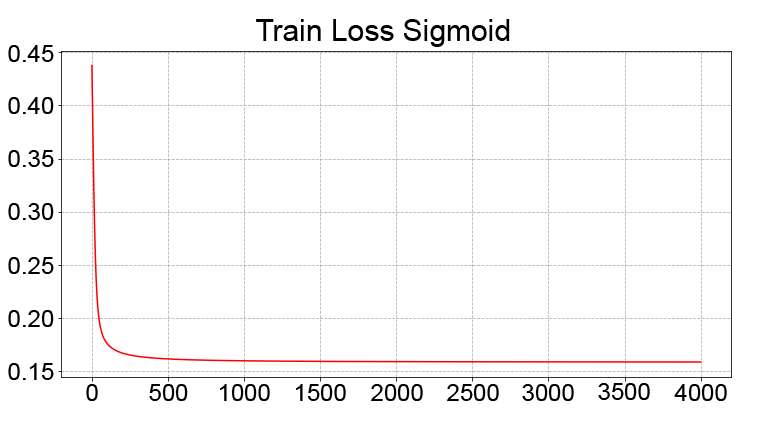
<style>
.page{position:relative;width:764px;height:430px;background:#ffffff}
.page>*{position:absolute;margin:0}
.t1{font:30px "ArialMT";color:#000000}
.t2{font:24px "ArialMT";color:#000000}
</style>
<div class="page">
<p class="t1" style="left:256px;top:19px;width:254px;height:28px">Train Loss Sigmoid</p>
<p class="t2" style="left:8px;top:45px;width:46px;height:17px">0.45</p>
<p class="t2" style="left:8px;top:97px;width:46px;height:17px">0.40</p>
<p class="t2" style="left:8px;top:150px;width:46px;height:17px">0.35</p>
<p class="t2" style="left:8px;top:203px;width:46px;height:17px">0.30</p>
<p class="t2" style="left:8px;top:257px;width:46px;height:17px">0.25</p>
<p class="t2" style="left:8px;top:310px;width:46px;height:17px">0.20</p>
<p class="t2" style="left:8px;top:363px;width:46px;height:17px">0.15</p>
<p class="t2" style="left:86px;top:384px;width:12px;height:17px">0</p>
<p class="t2" style="left:149px;top:384px;width:39px;height:17px">500</p>
<p class="t2" style="left:220px;top:384px;width:50px;height:17px">1000</p>
<p class="t2" style="left:296px;top:384px;width:50px;height:17px">1500</p>
<p class="t2" style="left:371px;top:384px;width:52px;height:17px">2000</p>
<p class="t2" style="left:447px;top:384px;width:52px;height:17px">2500</p>
<p class="t2" style="left:522px;top:384px;width:52px;height:17px">3000</p>
<p class="t2" style="left:598px;top:383px;width:52px;height:17px">3500</p>
<p class="t2" style="left:674px;top:384px;width:53px;height:17px">4000</p>
</div>
